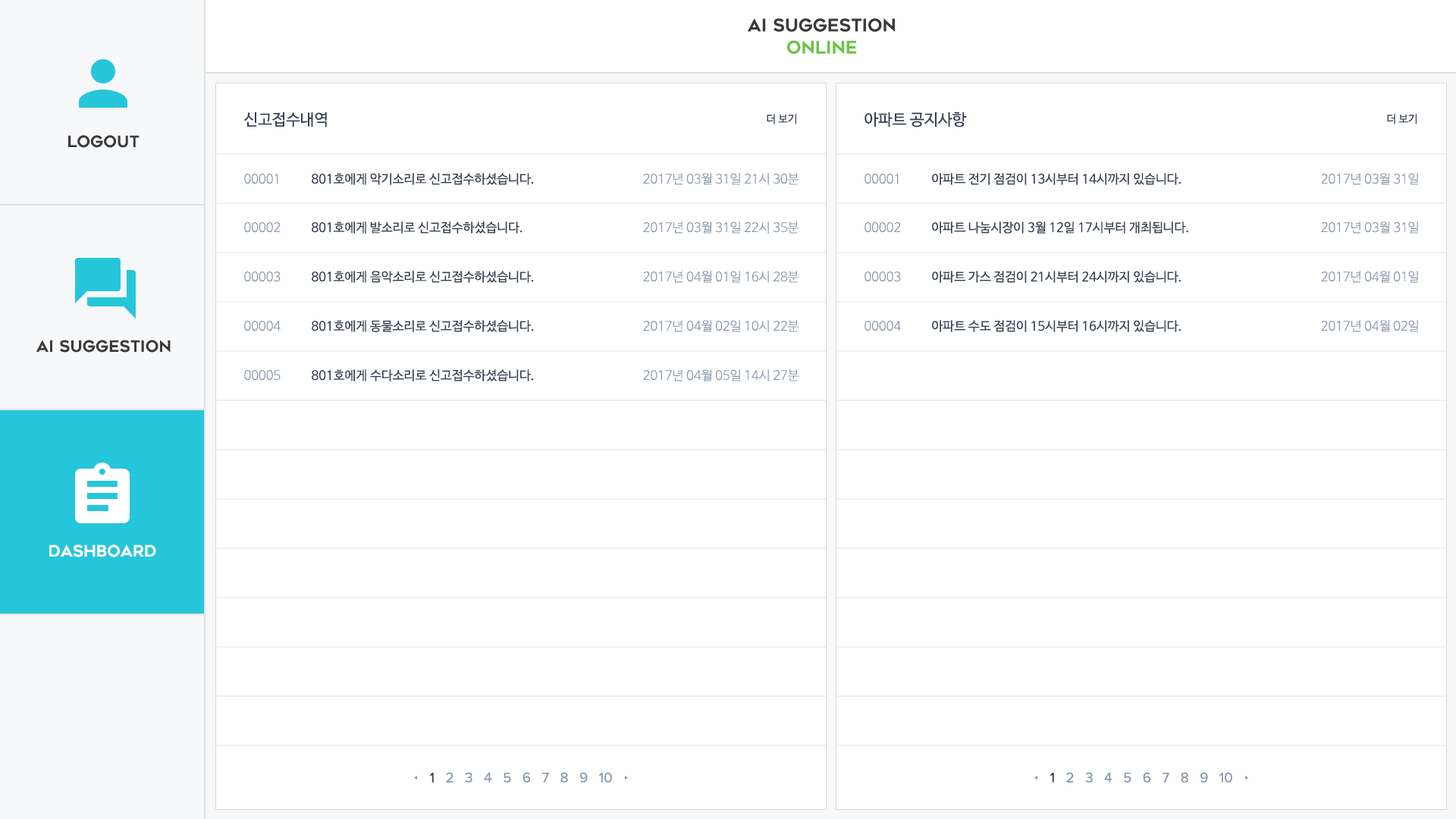
<style>
.page{position:relative;width:1456px;height:819px;background:#ffffff}
.page>*{position:absolute;margin:0}
.t1{font:17.4px/22.1px "Geometos";color:#3b3b3b}
.t2{font:17.4px/22.1px "Geometos";color:#6ac447}
.t3{font:15.8px "NanumBarunGothic";color:#354052}
.t4{font:10.7px "NanumBarunGothic";color:#354052}
.t5{font:15.8px "Geometos";color:#3b3b3b}
.t6{font:12.6px "NanumBarunGothicLight";color:#8494a7}
.t7{font:12.6px "NanumBarunGothic";color:#354052}
.t8{font:15.8px "Geometos";color:#ffffff}
.t9{font:14.2px "ProximaNovaA-Regular";color:#8494a7}
.t10{font:14.2px "ProximaNovaA-Regular";color:#354052}
</style>
<div class="page">
<p class="t1" style="left:747px;top:18px;width:148px;height:36px;text-align:center">ai suggestion<br><span class="t2">online</span></p>
<p class="t3" style="left:243px;top:112px;width:84px;height:15px">신고접수내역</p>
<p class="t4" style="left:767px;top:114px;width:29px;height:10px">더 보기</p>
<p class="t3" style="left:864px;top:112px;width:103px;height:15px">아파트 공지사항</p>
<p class="t4" style="left:1387px;top:114px;width:30px;height:10px">더 보기</p>
<p class="t5" style="left:68px;top:135px;width:72px;height:13px">logout</p>
<p class="t6" style="left:244px;top:174px;width:34px;height:10px">00001</p>
<p class="t7" style="left:312px;top:173px;width:222px;height:12px">801호에게 악기소리로 신고접수하셨습니다.</p>
<p class="t6" style="left:643px;top:173px;width:156px;height:12px">2017년 03월 31일 21시 30분</p>
<p class="t6" style="left:864px;top:174px;width:35px;height:10px">00001</p>
<p class="t7" style="left:932px;top:173px;width:249px;height:12px">아파트 전기 점검이 13시부터 14시까지 있습니다.</p>
<p class="t6" style="left:1321px;top:173px;width:97px;height:12px">2017년 03월 31일</p>
<p class="t7" style="left:312px;top:221px;width:210px;height:13px">801호에게 발소리로 신고접수하셨습니다.</p>
<p class="t6" style="left:643px;top:221px;width:156px;height:13px">2017년 03월 31일 22시 35분</p>
<p class="t7" style="left:932px;top:221px;width:256px;height:13px">아파트 나눔시장이 3월 12일 17시부터 개최됩니다.</p>
<p class="t6" style="left:1321px;top:221px;width:97px;height:13px">2017년 03월 31일</p>
<p class="t6" style="left:244px;top:222px;width:37px;height:11px">00002</p>
<p class="t6" style="left:864px;top:222px;width:37px;height:11px">00002</p>
<p class="t6" style="left:244px;top:271px;width:37px;height:11px">00003</p>
<p class="t7" style="left:312px;top:271px;width:222px;height:12px">801호에게 음악소리로 신고접수하셨습니다.</p>
<p class="t6" style="left:643px;top:271px;width:156px;height:12px">2017년 04월 01일 16시 28분</p>
<p class="t6" style="left:864px;top:271px;width:37px;height:11px">00003</p>
<p class="t7" style="left:932px;top:271px;width:249px;height:12px">아파트 가스 점검이 21시부터 24시까지 있습니다.</p>
<p class="t6" style="left:1321px;top:271px;width:97px;height:12px">2017년 04월 01일</p>
<p class="t6" style="left:244px;top:321px;width:37px;height:10px">00004</p>
<p class="t7" style="left:312px;top:320px;width:222px;height:12px">801호에게 동물소리로 신고접수하셨습니다.</p>
<p class="t6" style="left:643px;top:320px;width:156px;height:12px">2017년 04월 02일 10시 22분</p>
<p class="t6" style="left:864px;top:321px;width:37px;height:10px">00004</p>
<p class="t7" style="left:932px;top:320px;width:249px;height:12px">아파트 수도 점검이 15시부터 16시까지 있습니다.</p>
<p class="t6" style="left:1321px;top:320px;width:97px;height:12px">2017년 04월 02일</p>
<p class="t5" style="left:36px;top:340px;width:135px;height:13px">AI Suggestion</p>
<p class="t6" style="left:244px;top:370px;width:37px;height:11px">00005</p>
<p class="t7" style="left:312px;top:369px;width:222px;height:12px">801호에게 수다소리로 신고접수하셨습니다.</p>
<p class="t6" style="left:643px;top:369px;width:156px;height:12px">2017년 04월 05일 14시 27분</p>
<p class="t8" style="left:49px;top:544px;width:107px;height:13px">dashboard</p>
<p class="t9" style="left:430px;top:772px;width:182px;height:11px"><span class="t10">1</span>   2   3   4   5   6   7   8   9   10</p>
<p class="t9" style="left:1050px;top:772px;width:182px;height:11px"><span class="t10">1</span>   2   3   4   5   6   7   8   9   10</p>
</div>
